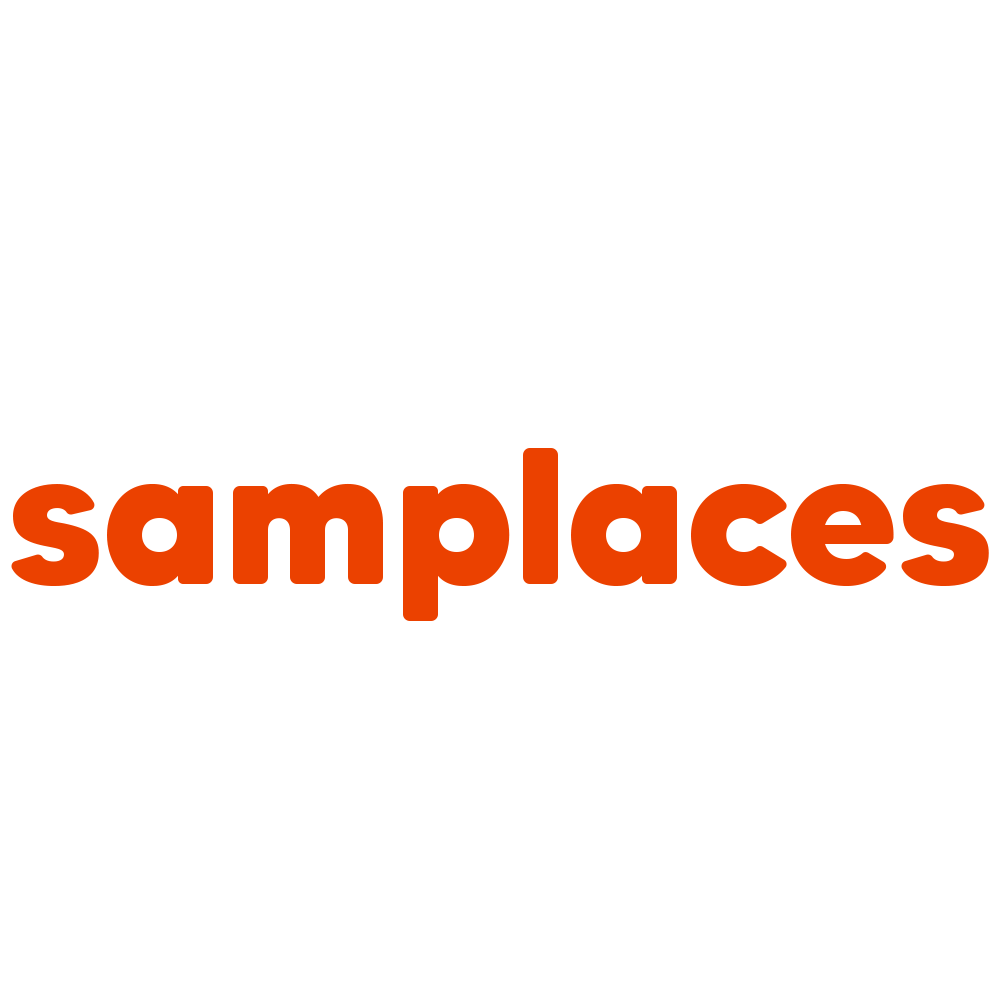
<style>
.page{position:relative;width:1000px;height:1000px;background:#ffffff}
.page>*{position:absolute;margin:0}
.t1{font:194px "MADETommySoft-ExtraBold";color:#eb4100}
</style>
<div class="page">
<p class="t1" style="left:11px;top:448px;width:978px;height:173px">samplaces</p>
</div>
